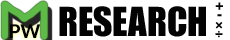
<style>
.page{position:relative;width:230px;height:40px;background:#ffffff}
.page>*{position:absolute;margin:0}
.t1{font:37px "Impact";color:#030303}
.t2{font:15px "Impact";color:#030303}
.t3{font:19px "Lato-Heavy";color:#030303}
</style>
<div class="page">
<p class="t1" style="left:59px;top:6px;width:147px;height:31px">RESEARCH</p>
<p class="t2" style="left:215px;top:2px;width:8px;height:8px">+</p>
<p class="t2" style="left:217px;top:14px;width:5px;height:3px">-</p>
<p class="t3" style="left:10px;top:24px;width:31px;height:14px">PW</p>
<p class="t2" style="left:215px;top:22px;width:8px;height:7px">×</p>
<p class="t2" style="left:215px;top:31px;width:8px;height:7px">÷</p>
</div>
